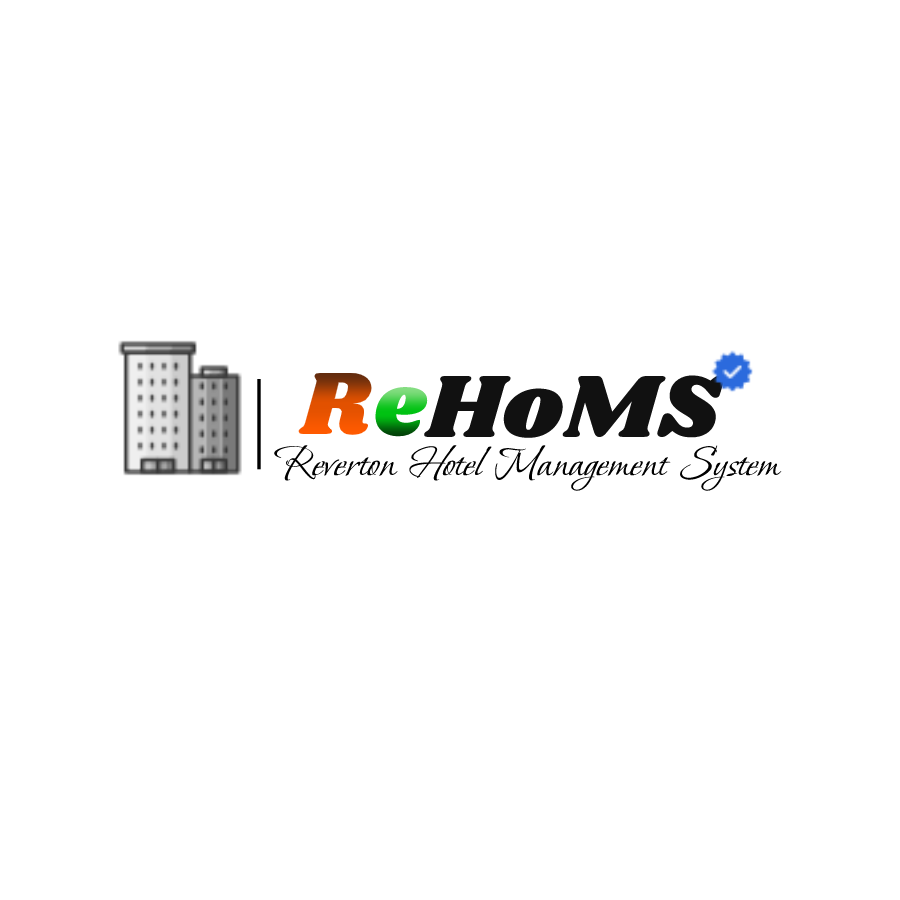
<style>
.page{position:relative;width:900px;height:900px;background:#ffffff}
.page>*{position:absolute;margin:0}
.t1{font:91.6px "Shrikhand-Regular"}
.t2{font:91.6px "Shrikhand-Regular";color:#111111}
.t3{font:47px "BonheurRoyale-Regular";color:#000000}
</style>
<div class="page">
<p class="t1" style="left:298px;top:372px;width:76px;height:63px">R</p>
<p class="t2" style="left:423px;top:375px;width:302px;height:63px">HoMS</p>
<p class="t1" style="left:372px;top:387px;width:57px;height:50px">e</p>
<p class="t3" style="left:274px;top:445px;width:508px;height:46px">Reverton Hotel Management System</p>
</div>
